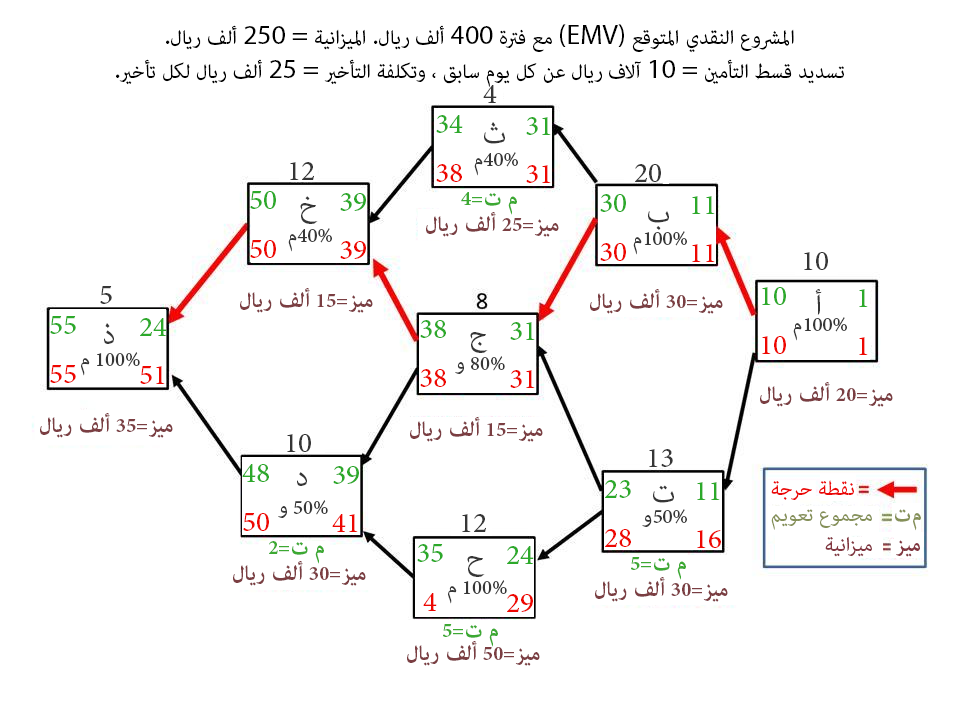
<style>
.page{position:relative;width:960px;height:720px;background:#ffffff}
.page>*{position:absolute;margin:0}
.t1{font:27.8px "AdobeArabic-Regular";color:#000000}
.t2{font:27.8px "MyriadPro-Regular";color:#000000}
.t3{font:40px "AdobeArabic-Regular";color:#363636}
.t4{font:40px "AdobeArabic-Regular";color:#2ca92a}
.t5{font:28.3px "AdobeArabic-Regular";color:#363636}
.t6{font:40px "AdobeArabic-Regular";color:#ee0701}
.t7{font:28.8px "AdobeArabic-Bold";color:#3ca932}
.t8{font:28.8px "AdobeArabic-Bold";color:#7b3e42}
.t9{font:27.8px "AdobeArabic-Regular";color:#eb0807}
.t10{font:27.8px "AdobeArabic-Regular";color:#859058}
.t11{font:27.8px "AdobeArabic-Bold";color:#859058}
.t12{font:27.8px "AdobeArabic-Regular";color:#82353f}
.t13{font:27.8px "AdobeArabic-Bold";color:#82353f}
</style>
<div class="page">
<p class="t1" style="left:116px;top:24px;width:728px;height:63px;text-align:center">المشروع النقدي المتوقع<span class="t2"> (EMV) </span>مع فترة<span class="t2"> 400 </span>ألف ريال<span class="t2">. </span>الميزانية<span class="t2"> = 250 </span>ألف ريال<span class="t2">.<br></span>تسديد قسط التأمين <span class="t2">= 10 </span>آلاف ريال عن كل يوم سابق ، وتكلفة التأخير<span class="t2"> = 25 </span>ألف ريال لكل تأخير<span class="t2">.</span></p>
<p class="t3" style="left:483px;top:85px;width:14px;height:18px">4</p>
<p class="t4" style="left:436px;top:115px;width:27px;height:18px">34</p>
<p class="t3" style="left:484px;top:122px;width:21px;height:22px">ث</p>
<p class="t4" style="left:526px;top:117px;width:25px;height:18px">31</p>
<p class="t5" style="left:474px;top:152px;width:44px;height:24px">40%م</p>
<p class="t3" style="left:290px;top:162px;width:24px;height:18px">12</p>
<p class="t6" style="left:436px;top:164px;width:26px;height:18px">38</p>
<p class="t6" style="left:526px;top:165px;width:25px;height:18px">31</p>
<p class="t3" style="left:635px;top:164px;width:26px;height:18px">20</p>
<p class="t4" style="left:250px;top:191px;width:26px;height:18px">50</p>
<p class="t3" style="left:300px;top:196px;width:18px;height:28px">خ</p>
<p class="t4" style="left:340px;top:193px;width:26px;height:18px">39</p>
<p class="t7" style="left:461px;top:192px;width:56px;height:23px">م ت=4</p>
<p class="t4" style="left:600px;top:194px;width:26px;height:18px">30</p>
<p class="t4" style="left:692px;top:196px;width:23px;height:18px">11</p>
<p class="t8" style="left:426px;top:212px;width:133px;height:25px">ميز=25 ألف ريال</p>
<p class="t3" style="left:648px;top:211px;width:21px;height:19px">ب</p>
<p class="t5" style="left:288px;top:228px;width:44px;height:24px">40%م</p>
<p class="t5" style="left:633px;top:231px;width:54px;height:24px">100%م</p>
<p class="t6" style="left:250px;top:240px;width:26px;height:18px">50</p>
<p class="t6" style="left:340px;top:241px;width:26px;height:18px">39</p>
<p class="t6" style="left:600px;top:243px;width:26px;height:18px">30</p>
<p class="t6" style="left:692px;top:244px;width:23px;height:18px">11</p>
<p class="t3" style="left:804px;top:252px;width:24px;height:18px">10</p>
<p class="t3" style="left:100px;top:286px;width:12px;height:18px">5</p>
<p class="t8" style="left:240px;top:288px;width:133px;height:25px">ميز=15 ألف ريال</p>
<p class="t8" style="left:590px;top:289px;width:133px;height:25px">ميز=30 ألف ريال</p>
<p class="t4" style="left:762px;top:287px;width:24px;height:18px">10</p>
<p class="t3" style="left:815px;top:289px;width:7px;height:26px">أ</p>
<p class="t4" style="left:859px;top:289px;width:9px;height:18px">1</p>
<p class="t4" style="left:50px;top:316px;width:26px;height:18px">55</p>
<p class="t4" style="left:140px;top:318px;width:27px;height:18px">24</p>
<p class="t5" style="left:793px;top:317px;width:54px;height:24px">100%م</p>
<p class="t3" style="left:104px;top:323px;width:10px;height:21px">ذ</p>
<p class="t4" style="left:420px;top:320px;width:26px;height:18px">38</p>
<p class="t4" style="left:510px;top:322px;width:25px;height:18px">31</p>
<p class="t3" style="left:470px;top:332px;width:18px;height:21px">ج</p>
<p class="t6" style="left:762px;top:336px;width:24px;height:18px">10</p>
<p class="t6" style="left:859px;top:337px;width:9px;height:18px">1</p>
<p class="t5" style="left:81px;top:352px;width:59px;height:24px">100% م</p>
<p class="t6" style="left:50px;top:365px;width:26px;height:18px">55</p>
<p class="t6" style="left:140px;top:366px;width:25px;height:18px">51</p>
<p class="t5" style="left:455px;top:356px;width:50px;height:18px">80% و</p>
<p class="t6" style="left:420px;top:369px;width:26px;height:18px">38</p>
<p class="t6" style="left:510px;top:370px;width:25px;height:18px">31</p>
<p class="t8" style="left:760px;top:382px;width:133px;height:25px">ميز=20 ألف ريال</p>
<p class="t8" style="left:40px;top:413px;width:133px;height:25px">ميز=35 ألف ريال</p>
<p class="t8" style="left:410px;top:417px;width:133px;height:25px">ميز=15 ألف ريال</p>
<p class="t3" style="left:287px;top:434px;width:24px;height:18px">10</p>
<p class="t3" style="left:649px;top:449px;width:24px;height:18px">13</p>
<p class="t4" style="left:242px;top:464px;width:27px;height:18px">48</p>
<p class="t3" style="left:297px;top:472px;width:10px;height:14px">د</p>
<p class="t4" style="left:333px;top:466px;width:26px;height:18px">39</p>
<p class="t4" style="left:605px;top:480px;width:26px;height:18px">23</p>
<p class="t3" style="left:653px;top:485px;width:21px;height:18px">ت</p>
<p class="t4" style="left:697px;top:482px;width:23px;height:18px">11</p>
<p class="t9" style="left:771px;top:480px;width:83px;height:20px">نقطة حرجة</p>
<p class="t5" style="left:278px;top:500px;width:50px;height:18px">50% و</p>
<p class="t5" style="left:642px;top:509px;width:45px;height:18px">50%و</p>
<p class="t10" style="left:771px;top:509px;width:101px;height:21px">مجموع تعويم</p>
<p class="t11" style="left:895px;top:509px;width:26px;height:22px">م ت</p>
<p class="t6" style="left:243px;top:513px;width:26px;height:18px">50</p>
<p class="t6" style="left:332px;top:514px;width:26px;height:18px">41</p>
<p class="t3" style="left:462px;top:514px;width:24px;height:18px">12</p>
<p class="t6" style="left:605px;top:529px;width:26px;height:18px">28</p>
<p class="t6" style="left:697px;top:530px;width:24px;height:18px">16</p>
<p class="t7" style="left:269px;top:541px;width:55px;height:23px">م ت=2</p>
<p class="t4" style="left:417px;top:544px;width:26px;height:18px">35</p>
<p class="t12" style="left:825px;top:536px;width:47px;height:21px">ميزانية</p>
<p class="t13" style="left:896px;top:540px;width:24px;height:17px">ميز</p>
<p class="t3" style="left:467px;top:556px;width:18px;height:21px">ح</p>
<p class="t4" style="left:507px;top:546px;width:27px;height:18px">24</p>
<p class="t7" style="left:631px;top:557px;width:55px;height:23px">م ت=5</p>
<p class="t8" style="left:233px;top:561px;width:133px;height:25px">ميز=30 ألف ريال</p>
<p class="t5" style="left:448px;top:580px;width:59px;height:24px">100% م</p>
<p class="t8" style="left:595px;top:577px;width:133px;height:25px">ميز=30 ألف ريال</p>
<p class="t6" style="left:423px;top:593px;width:14px;height:18px">4</p>
<p class="t6" style="left:507px;top:594px;width:26px;height:18px">29</p>
<p class="t7" style="left:443px;top:624px;width:55px;height:23px">م ت=5</p>
<p class="t8" style="left:407px;top:641px;width:133px;height:25px">ميز=50 ألف ريال</p>
</div>
